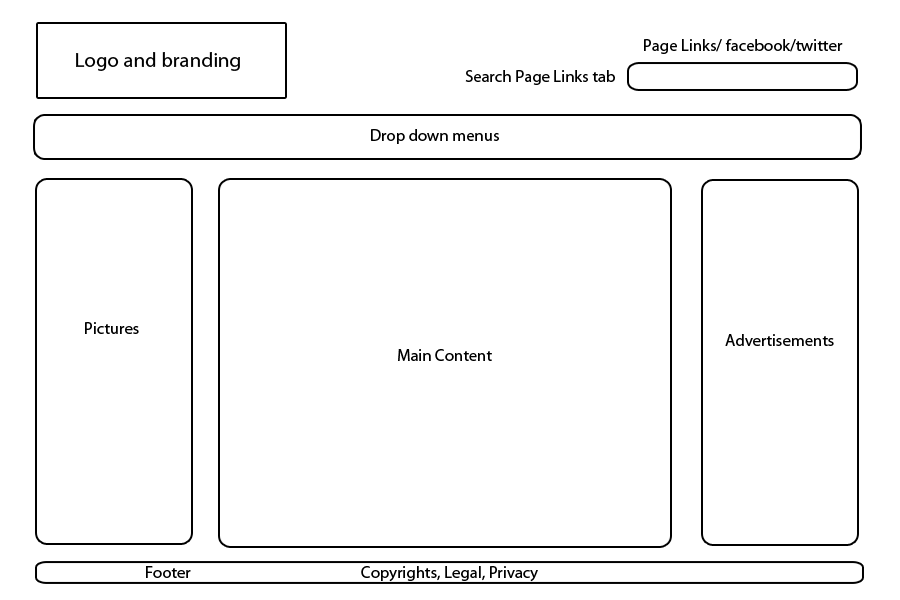
<style>
.page{position:relative;width:900px;height:600px;background:#ffffff}
.page>*{position:absolute;margin:0}
.t1{font:16.7px "MyriadPro-Regular";color:#000000}
.t2{font:20.8px "MyriadPro-Regular";color:#000000}
.t3{font:20.8px "MyriadPro-Regular";color:#ffffff}
.t4{font:16.7px "MyriadPro-Regular";color:#010101}
</style>
<div class="page">
<p class="t1" style="left:644px;top:39px;width:199px;height:15px">Page Links/ facebook/twitter</p>
<p class="t2" style="left:76px;top:52px;width:199px;height:19px">Logo and branding<span class="t3">ogo</span></p>
<p class="t4" style="left:465px;top:70px;width:150px;height:15px">Search Page Links tab</p>
<p class="t1" style="left:371px;top:129px;width:128px;height:15px">Drop down menus</p>
<p class="t1" style="left:85px;top:322px;width:54px;height:12px">Pictures</p>
<p class="t1" style="left:725px;top:334px;width:109px;height:12px">Advertisements</p>
<p class="t1" style="left:398px;top:349px;width:94px;height:12px">Main Content</p>
<p class="t1" style="left:146px;top:566px;width:392px;height:16px">Footer     Copyrights, Legal, Privacy</p>
</div>
